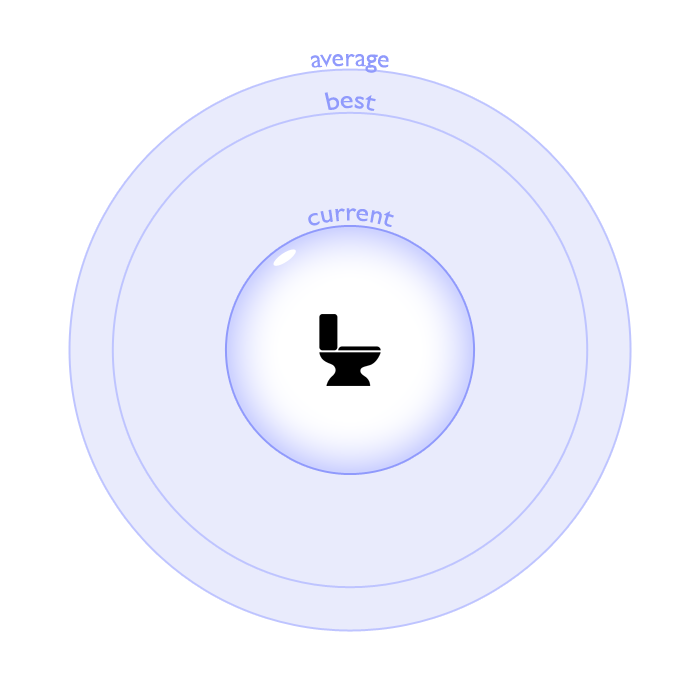
<style>
.page{position:relative;width:690px;height:690px;background:#ffffff}
.page>*{position:absolute;margin:0}
.t1{font:25.6px "GillSans";color:#909afc}
</style>
<div class="page">
<p class="t1" style="left:310px;top:54px;width:79px;height:19px">average</p>
<p class="t1" style="left:324px;top:92px;width:52px;height:19px">best</p>
<p class="t1" style="left:308px;top:208px;width:86px;height:19px">current</p>
</div>
